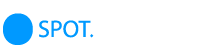
<style>
.page{position:relative;width:200px;height:55px;background:#ffffff}
.page>*{position:absolute;margin:0}
.t1{font:250px "MyriadPro-Regular";color:#0099ff}
.t2{font:24px "MyriadPro-Regular";color:#0099ff}
</style>
<div class="page">
<p class="t1" style="left:3px;top:13px;width:30px;height:32px">.</p>
<p class="t2" style="left:39px;top:20px;width:55px;height:18px">SPOT.</p>
</div>
